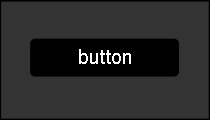
<style>
.page{position:relative;width:210px;height:120px;background:#333333}
.page>*{position:absolute;margin:0}
.t1{font:20px "ArialMT";color:#fefefe}
</style>
<div class="page">
<p class="t1" style="left:79px;top:49px;width:52px;height:15px">button</p>
</div>
